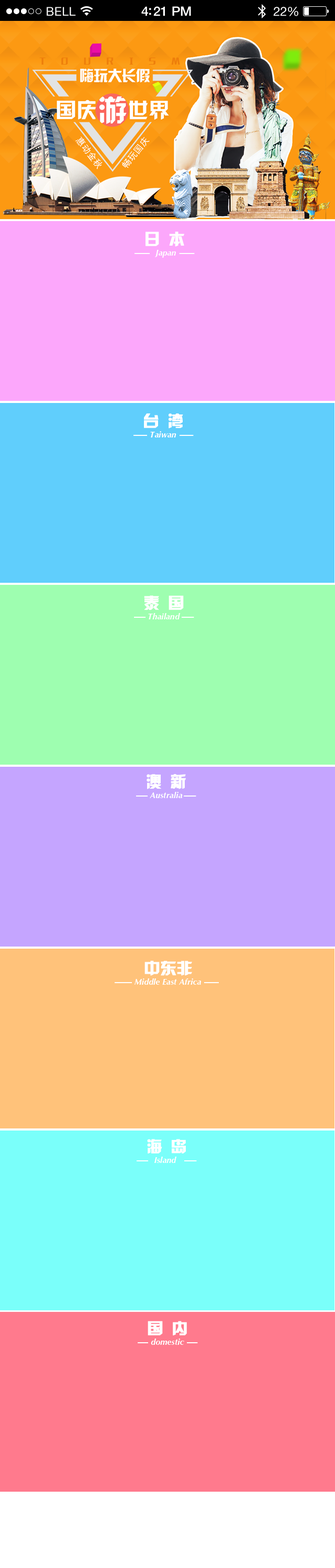
<style>
.page{position:relative;width:335px;height:1568px}
.page>*{position:absolute;margin:0}
.t1{font:12px "HelveticaNeue";letter-spacing:0.02em;color:#ffffff}
.t2{font:13.1px "HelveticaNeue-Medium";letter-spacing:-0.02em;color:#ffffff}
.t3{font:12.5px "HelveticaNeue";letter-spacing:-0.02em;color:#ffffff}
.t4{font:15.6px "HYk2gj";color:#ffffff;font-weight:bold}
.t5{font:8.3px "OptimaLTStd-BoldItalic";color:#ffffff}
.t6{font:15.7px "HYk2gj";color:#ffffff;font-weight:bold}
.t7{font:8.4px "OptimaLTStd-BoldItalic";color:#ffffff}
</style>
<div class="page">
<p class="t1" style="left:47px;top:7px;width:29px;height:9px">BELL</p>
<p class="t2" style="left:141px;top:6px;width:50px;height:10px">4:21 PM</p>
<p class="t3" style="left:273px;top:7px;width:25px;height:9px">22%</p>
<p class="t4" style="left:145px;top:232px;width:39px;height:15px">日 本</p>
<p class="t5" style="left:155px;top:250px;width:21px;height:8px">Japan</p>
<p class="t4" style="left:144px;top:413px;width:39px;height:16px">台 湾</p>
<p class="t5" style="left:150px;top:431px;width:26px;height:6px">Taiwan</p>
<p class="t4" style="left:144px;top:595px;width:39px;height:15px">泰 国</p>
<p class="t5" style="left:148px;top:613px;width:32px;height:6px">Thailand</p>
<p class="t6" style="left:146px;top:774px;width:40px;height:15px">澳 新</p>
<p class="t7" style="left:149px;top:792px;width:33px;height:6px">Australia</p>
<p class="t4" style="left:144px;top:961px;width:48px;height:15px">中东非</p>
<p class="t5" style="left:134px;top:978px;width:67px;height:7px">Middle East Africa</p>
<p class="t4" style="left:147px;top:1139px;width:39px;height:15px">海 岛</p>
<p class="t5" style="left:154px;top:1157px;width:23px;height:6px">Island</p>
<p class="t4" style="left:147px;top:1321px;width:40px;height:14px">国 内</p>
<p class="t5" style="left:151px;top:1339px;width:33px;height:6px">domestic</p>
</div>
